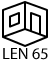
<style>
.page{position:relative;width:50px;height:60px;background:#ffffff}
.page>*{position:absolute;margin:0}
.t1{font:16.3px "MyriadPro-Regular";color:#000000}
</style>
<div class="page">
<p class="t1" style="left:3px;top:48px;width:45px;height:12px">LEN 65</p>
</div>
